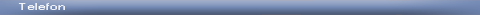
<style>
.page{position:relative;width:480px;height:15px}
.page>*{position:absolute;margin:0}
.t1{font:9px "MS Sans Serif";color:#ffffff;scale:1.6 1}
</style>
<div class="page">
<p class="t1" style="left:18px;top:3px;width:47px;height:7px">Telefon</p>
</div>
